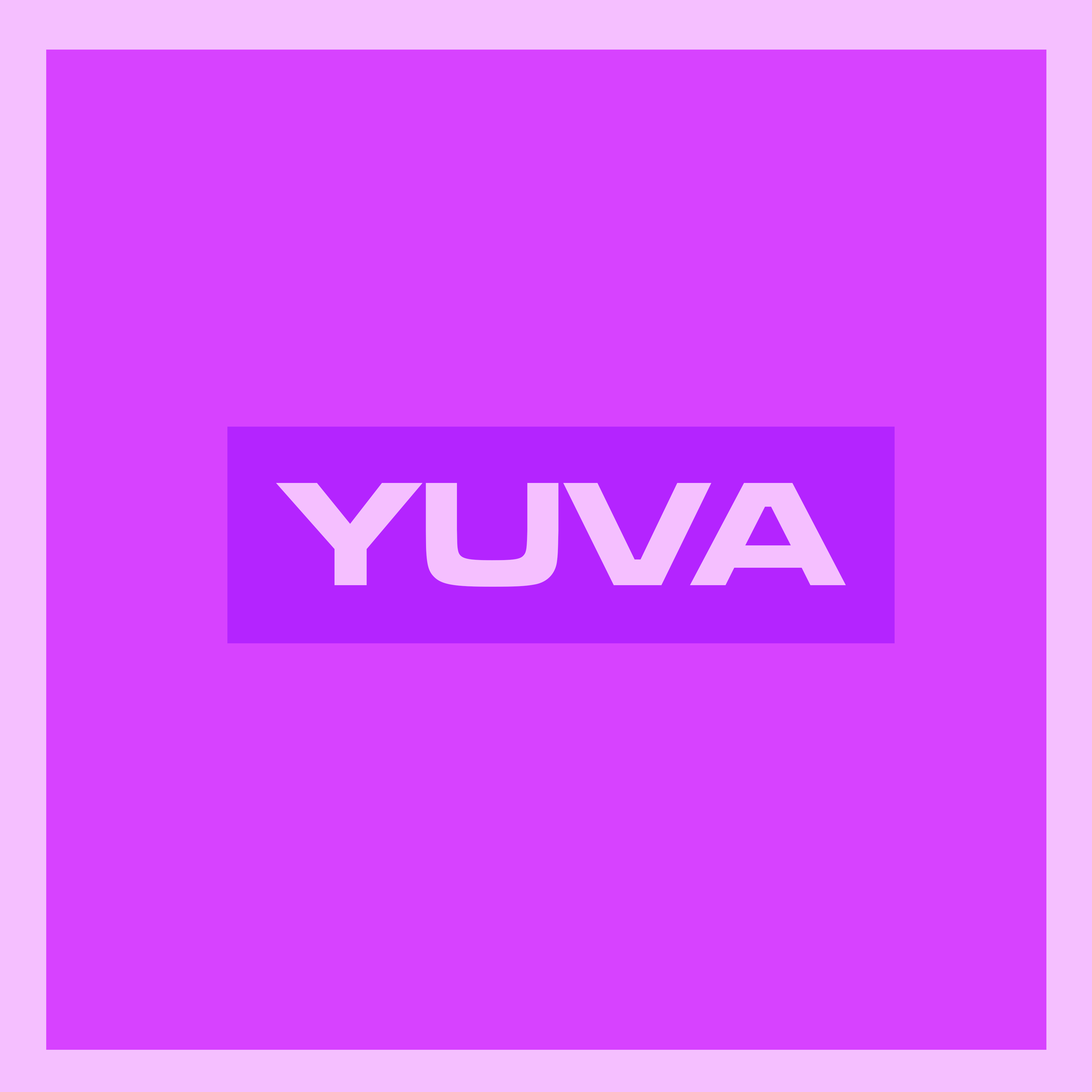
<style>
.page{position:relative;width:1092px;height:1092px;background:#d742ff}
.page>*{position:absolute;margin:0}
.t1{font:153px "MicrogrammaD-BoldExte";color:#f5bfff}
</style>
<div class="page">
<p class="t1" style="left:276px;top:483px;width:570px;height:104px">YUVA</p>
</div>
